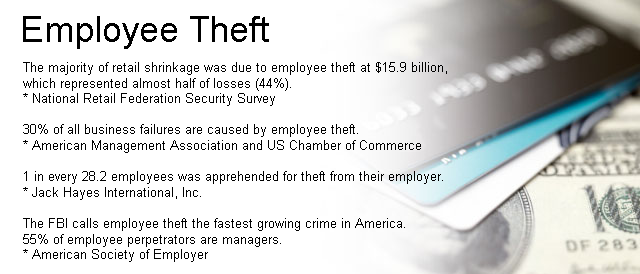
<style>
.page{position:relative;width:640px;height:274px;background:#ffffff}
.page>*{position:absolute;margin:0}
.t1{font:36px "ArialMT";color:#000000}
.t2{font:13px "ArialMT";color:#000000}
</style>
<div class="page">
<p class="t1" style="left:23px;top:16px;width:246px;height:33px">Employee Theft</p>
<p class="t2" style="left:23px;top:62px;width:424px;height:200px">The majority of retail shrinkage was due to employee theft at $15.9 billion, <br>which represented almost half of losses (44%).<br>* National Retail Federation Security Survey<br><br>30% of all business failures are caused by employee theft.<br>* American Management Association and US Chamber of Commerce<br><br>1 in every 28.2 employees was apprehended for theft from their employer.<br>* Jack Hayes International, Inc.<br><br>The FBI calls employee theft the fastest growing crime in America. <br>55% of employee perpetrators are managers.<br>* American Society of Employer</p>
</div>
